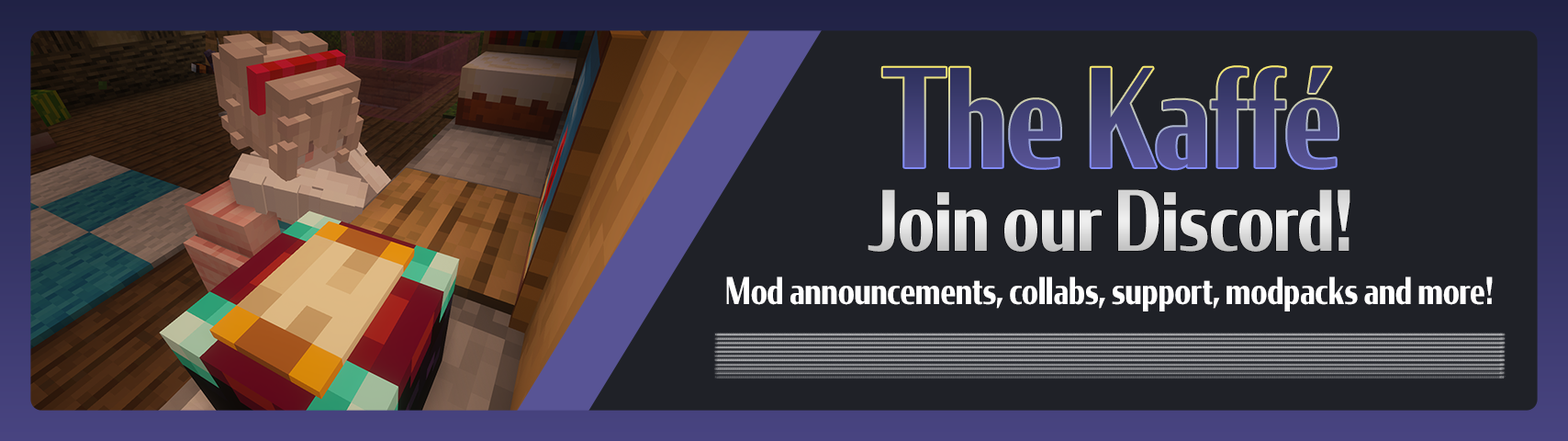
<style>
.page{position:relative;width:1568px;height:441px;background:#1f2127}
.page>*{position:absolute;margin:0}
.t1{font:134.8px "Condor-Bold";color:#46447d;scale:0.73 1}
.t2{font:82.4px "Condor-Bold";color:#dfdfdf;scale:0.73 1}
.t3{font:36.6px "Condor-Bold";color:#ffffff;scale:0.73 1}
</style>
<div class="page">
<p class="t1" style="left:882px;top:67px;width:456px;height:102px">The Kaffé</p>
<p class="t2" style="left:868px;top:189px;width:482px;height:63px">Join our Discord!</p>
<p class="t3" style="left:726px;top:276px;width:767px;height:35px">Mod announcements, collabs, support, modpacks and more!</p>
</div>
